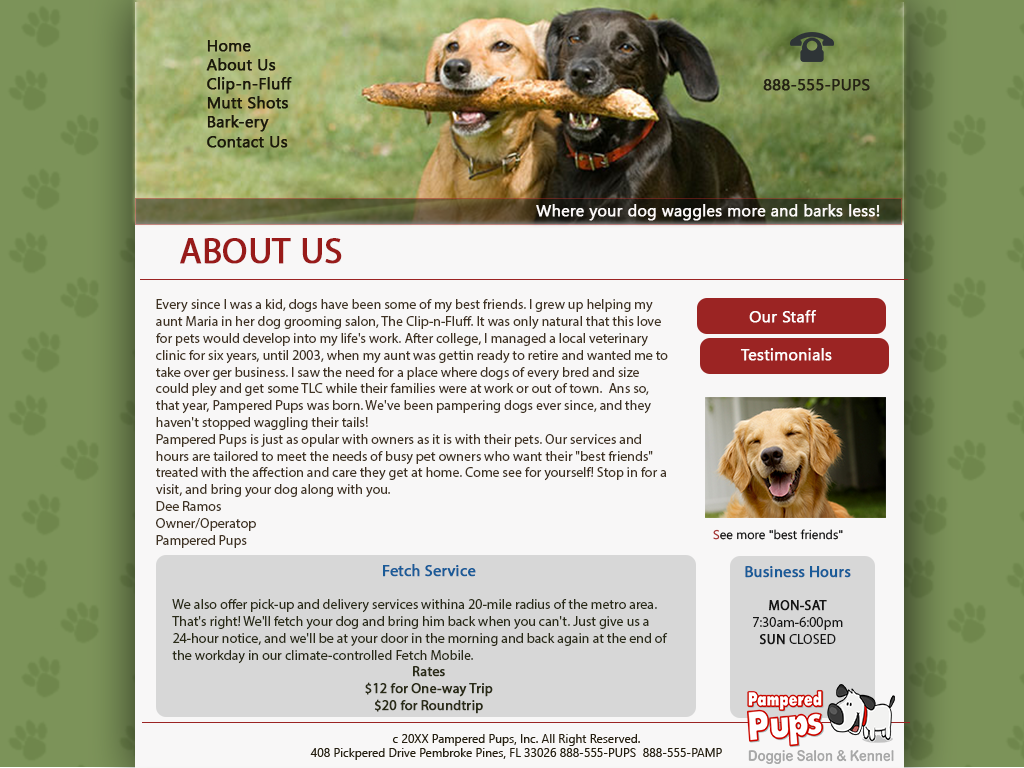
<style>
.page{position:relative;width:1024px;height:768px;background:#f8f7f7}
.page>*{position:absolute;margin:0}
.t1{font:16px "SegoeUI";color:#1a180b;font-weight:bold}
.t2{font:16px "SegoeUI";color:#242214;font-weight:bold}
.t3{font:16px "SegoeUI";color:#ffffff;font-weight:bold}
.t4{font:16px "SegoeUI";color:#fcf9f9;font-weight:bold}
.t5{font:36px "MyriadPro-Regular";color:#981b1a;text-transform:uppercase;font-weight:bold}
.t6{font:14px "MyriadPro-Regular";color:#403323}
.t7{font:16px "SegoeUI";color:#fdfdfd;font-weight:bold}
.t8{font:12.6px "SegoeUI";color:#111111}
.t9{font:12.6px "SegoeUI";color:#9d2928}
.t10{font:14px "MyriadPro-Regular";color:#2a2b17}
.t11{font:16px "MyriadPro-Regular";color:#1a5b98;font-weight:bold}
.t12{font:14px "MyriadPro-Regular";color:#2a2b17;font-weight:bold}
.t13{font:14px "MyriadPro-Regular";color:#161616;font-weight:bold}
.t14{font:14px "MyriadPro-Regular";color:#161616}
.t15{font:12px "SegoeUI";color:#241e10}
</style>
<div class="page">
<p class="t1" style="left:206px;top:40px;width:86px;height:108px">Home<br>About Us<br>Clip-n-Fluff<br>Mutt Shots<br>Bark-ery<br>Contact Us</p>
<p class="t2" style="left:763px;top:79px;width:107px;height:12px"><span class="t3"><br></span>888-555-PUPS</p>
<p class="t4" style="left:536px;top:204px;width:344px;height:17px">Where your dog waggles more and barks less!</p>
<p class="t5" style="left:180px;top:238px;width:162px;height:26px">About Us</p>
<p class="t6" style="left:156px;top:299px;width:512px;height:249px">Every since I was a kid, dogs have been some of my best friends. I grew up helping my aunt Maria in her dog grooming salon, The Clip-n-Fluff. It was only natural that this love for pets would develop into my life's work. After college, I managed a local veterinary clinic for six years, until 2003, when my aunt was gettin ready to retire and wanted me to take over ger business. I saw the need for a place where dogs of every bred and size could pley and get some TLC while their families were at work or out of town.  Ans so, that year, Pampered Pups was born. We've been pampering dogs ever since, and they haven't stopped waggling their tails!<br>Pampered Pups is just as opular with owners as it is with their pets. Our services and hours are tailored to meet the needs of busy pet owners who want their "best friends" treated with the affection and care they get at home. Come see for yourself! Stop in for a visit, and bring your dog along with you.<br>Dee Ramos<br>Owner/Operatop<br>Pampered Pups</p>
<p class="t7" style="left:749px;top:310px;width:68px;height:13px"><span class="t1"><br></span>Our Staff</p>
<p class="t7" style="left:740px;top:348px;width:92px;height:13px"><span class="t1"><br></span>Testimonials</p>
<p class="t8" style="left:713px;top:529px;width:130px;height:11px"><span class="t9">S</span>ee more "best friends"</p>
<p class="t10" style="left:172px;top:564px;width:496px;height:150px;text-align:center"><span class="t11">Fetch Service<br><br></span>We also offer pick-up and delivery services withina 20-mile radius of the metro area. That's right! We'll fetch your dog and bring him back when you can't. Just give us a 24-hour notice, and we'll be at your door in the morning and back again at the end of the workday in our climate-controlled Fetch Mobile.<br><span class="t12">Rates<br>$12 for One-way Trip<br>$20 for Roundtrip</span></p>
<p class="t11" style="left:745px;top:566px;width:106px;height:79px;text-align:center">Business Hours<br><br><span class="t13">MON-SAT </span><span class="t14">7:30am-6:00pm<br></span><span class="t13">SUN </span><span class="t14">CLOSED</span></p>
<p class="t15" style="left:310px;top:734px;width:412px;height:26px;text-align:center">c 20XX Pampered Pups, Inc. All Right Reserved.<br>408 Pickpered Drive Pembroke Pines, FL 33026 888-555-PUPS  888-555-PAMP</p>
</div>
